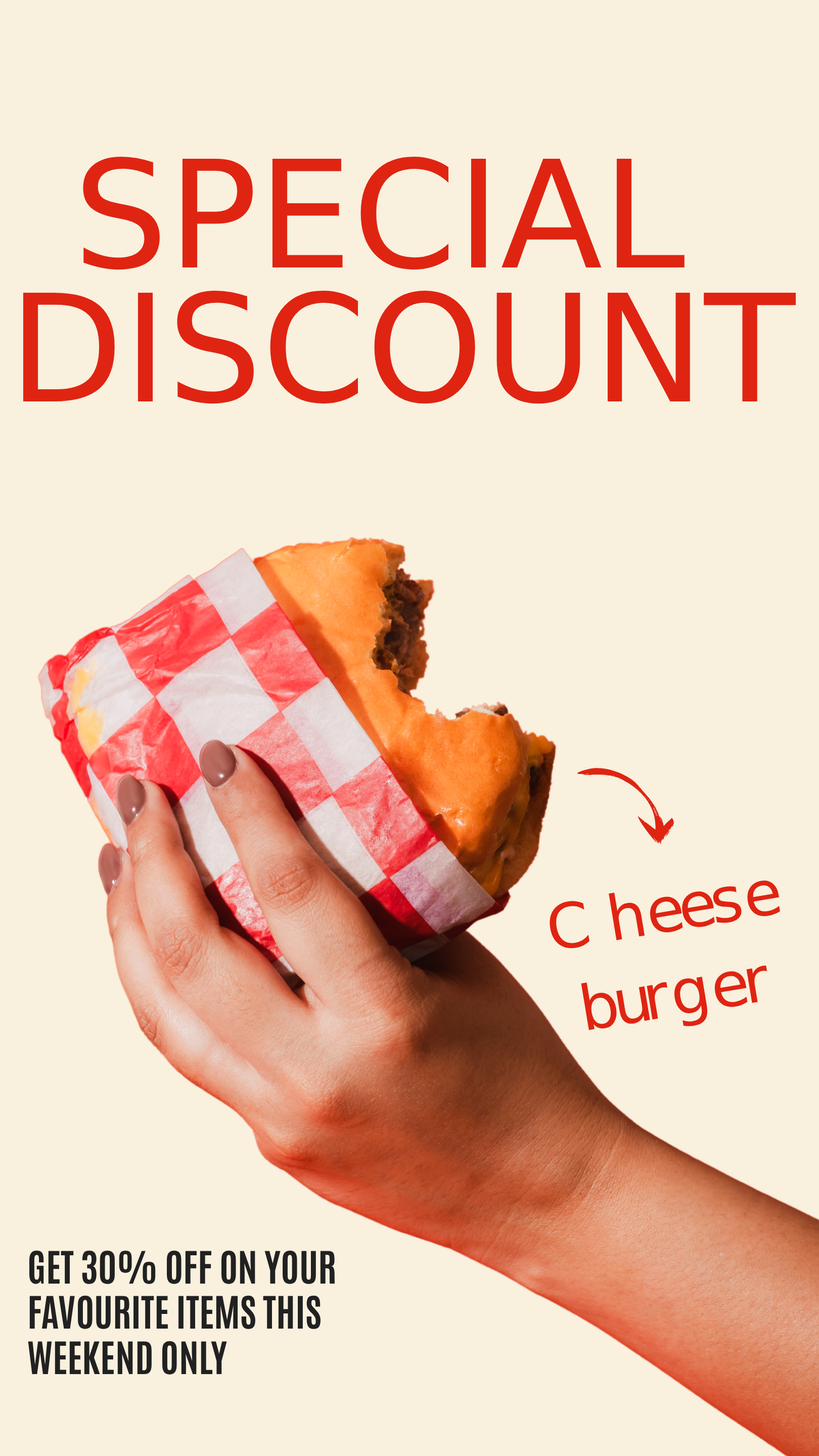
<style>
.page{position:relative;width:819px;height:1456px;background:#f9f0de}
.page>*{position:absolute;margin:0}
.t1{font:149.1px/133.9px "MotterCorpusStd-SemiCond";color:#e02412}
.t2{font:149.1px "MotterCorpusStd-SemiCond";color:#e02412}
.t3{font:62.2px "Breathing";color:#e02412}
.t4{font:37.9px/45.4px "Antonio-Bold";color:#212121}
.t5{font:37.9px/133.9px "Antonio-Bold";color:#212121}
</style>
<div class="page">
<p class="t1" style="left:23px;top:157px;width:773px;height:247px"><span class="t2">SPECIAL</span><br>DISCOUNT</p>
<p class="t3" style="left:746px;top:880px;width:34px;height:38px;rotate:-9deg">e</p>
<p class="t3" style="left:609px;top:892px;width:36px;height:48px;rotate:-9deg">h</p>
<p class="t3" style="left:681px;top:890px;width:34px;height:38px;rotate:-9deg">e</p>
<p class="t3" style="left:712px;top:886px;width:30px;height:37px;rotate:-9deg">s</p>
<p class="t3" style="left:548px;top:900px;width:41px;height:50px;rotate:-9deg">C</p>
<p class="t3" style="left:649px;top:896px;width:34px;height:38px;rotate:-9deg">e</p>
<p class="t3" style="left:746px;top:965px;width:21px;height:38px;rotate:-9deg">r</p>
<p class="t3" style="left:673px;top:977px;width:36px;height:49px;rotate:-9deg">g</p>
<p class="t3" style="left:713px;top:970px;width:35px;height:38px;rotate:-9deg">e</p>
<p class="t3" style="left:581px;top:982px;width:37px;height:48px;rotate:-9deg">b</p>
<p class="t3" style="left:616px;top:986px;width:34px;height:39px;rotate:-9deg">u</p>
<p class="t3" style="left:647px;top:982px;width:21px;height:38px;rotate:-9deg">r</p>
<p class="t4" style="left:28px;top:1250px;width:307px;height:125px"><span class="t5">GET 30% OFF ON YOUR</span><br>FAVOURITE ITEMS THIS<br>WEEKEND ONLY</p>
</div>
